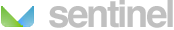
<style>
.page{position:relative;width:174px;height:30px;background:#ffffff}
.page>*{position:absolute;margin:0}
.t1{font:38px "Helvetica-Bold";letter-spacing:-0.06em;color:#c0c0c0}
</style>
<div class="page">
<p class="t1" style="left:49px;top:0px;width:124px;height:28px">sentinel</p>
</div>
